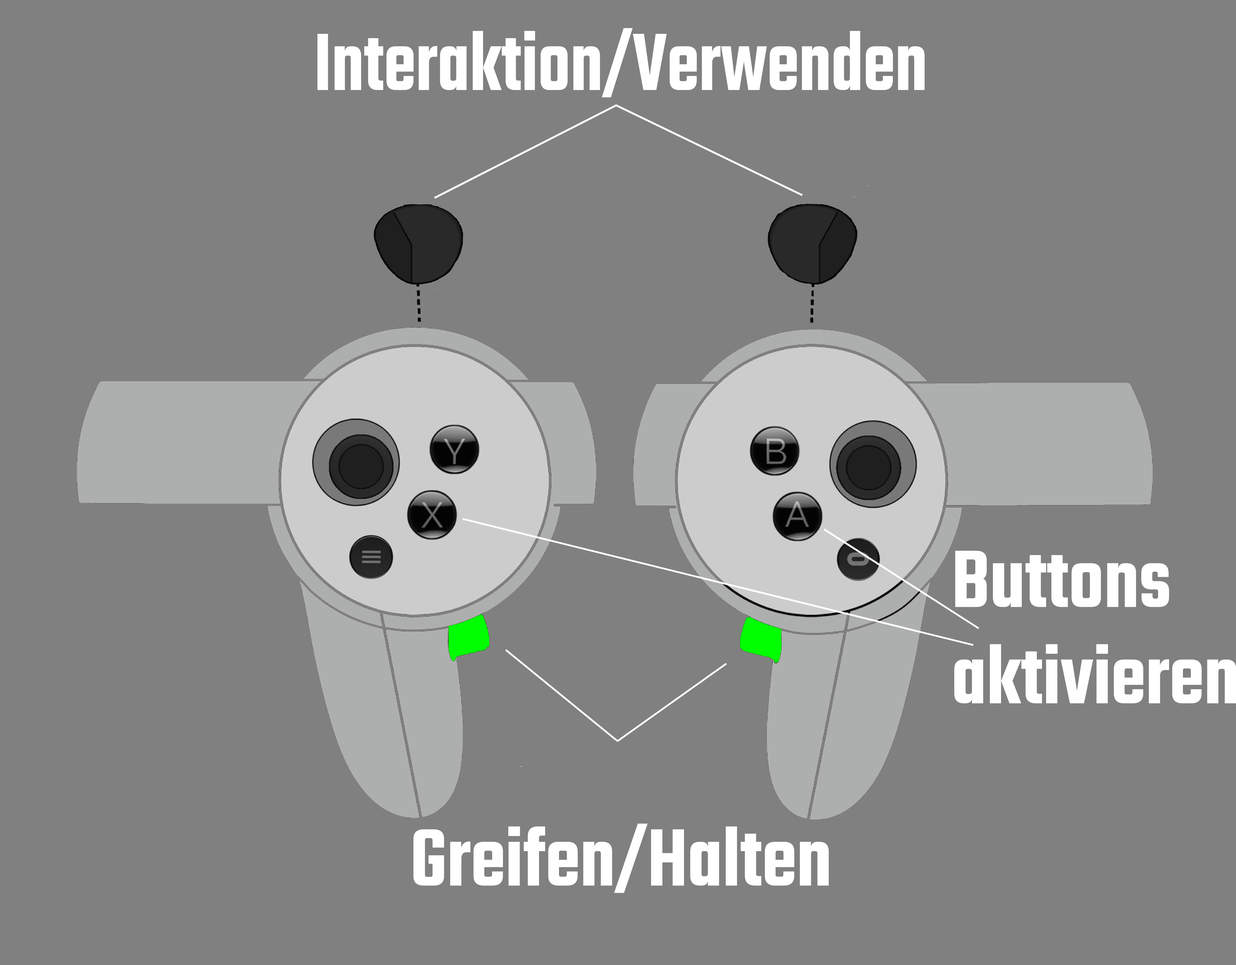
<style>
.page{position:relative;width:1236px;height:965px;background:#808080}
.page>*{position:absolute;margin:0}
.t1{font:88.3px "Teko-SemiBold";color:#ffffff;scale:0.84 1}
.t2{font:88.3px "Teko-SemiBold";color:#ffffff;scale:0.91 1}
</style>
<div class="page">
<p class="t1" style="left:317px;top:28px;width:608px;height:69px">Interaktion/Verwenden</p>
<p class="t2" style="left:954px;top:550px;width:282px;height:153px">Buttons<br>aktivieren</p>
<p class="t2" style="left:413px;top:823px;width:416px;height:70px">Greifen/Halten</p>
</div>
